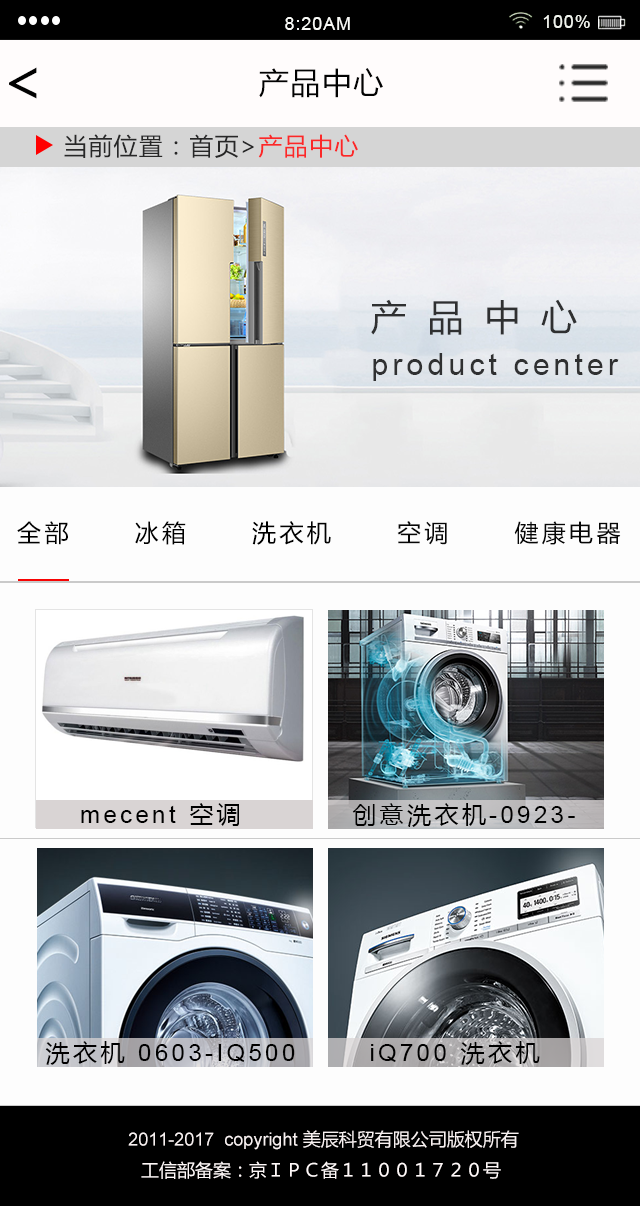
<style>
.page{position:relative;width:640px;height:1206px}
.page>*{position:absolute;margin:0}
.t1{font:18px "ArialMT";letter-spacing:0.05em;color:#f9faf7}
.t2{font:18px "ArialMT";letter-spacing:0.05em;color:#f1f4ee}
.t3{font:60px "MicrosoftYaHei";letter-spacing:0.05em;color:#020202}
.t4{font:30px "MicrosoftYaHei";letter-spacing:0.05em;color:#020202}
.t5{font:24px "MicrosoftYaHei";letter-spacing:0.05em}
.t6{font:36px "MicrosoftYaHei";letter-spacing:0.14em;color:#2f3031}
.t7{font:30px "ArialMT";letter-spacing:0.14em;color:#2f3031}
.t8{font:24px "MicrosoftYaHei";letter-spacing:0.14em;color:#000000}
.t9{font:24px "MicrosoftYaHei";letter-spacing:0.14em;color:#060606}
.t10{font:24px "ArialMT";letter-spacing:0.14em;color:#000000}
.t11{font:18px/3px "ArialMT";color:#f8f1f1}
.t12{font:18px/3px "MicrosoftYaHei";color:#f8f1f1}
.t13{font:18px/31px "MicrosoftYaHei";color:#fff9f9}
</style>
<div class="page">
<p class="t1" style="left:285px;top:17px;width:65px;height:13px">8:20AM</p>
<p class="t2" style="left:543px;top:15px;width:47px;height:13px">100%</p>
<p class="t3" style="left:9px;top:67px;width:28px;height:32px">&lt;</p>
<p class="t4" style="left:259px;top:68px;width:124px;height:30px">产品中心</p>
<p class="t5" style="left:64px;top:134px;width:294px;height:24px">当前位置：首页&gt;产品中心</p>
<p class="t6" style="left:371px;top:299px;width:206px;height:36px">产 品 中 心</p>
<p class="t7" style="left:373px;top:353px;width:246px;height:28px">product center</p>
<p class="t8" style="left:17px;top:521px;width:604px;height:24px">全部      冰箱      洗衣机      <span class="t9">空调      健康电器</span></p>
<p class="t10" style="left:81px;top:803px;width:158px;height:23px">mecent<span class="t8"> 空调</span></p>
<p class="t10" style="left:352px;top:803px;width:223px;height:24px"><span class="t8">创意洗衣机</span>-0923-</p>
<p class="t10" style="left:45px;top:1041px;width:250px;height:24px"><span class="t8">洗衣机 </span>0603-IQ500</p>
<p class="t10" style="left:371px;top:1041px;width:169px;height:24px">iQ700<span class="t8"> 洗衣机</span></p>
<p class="t11" style="left:128px;top:1130px;width:391px;height:49px;text-align:justify">2011-2017  copyright<span class="t12"> 美辰科贸有限公司版权所有<br></span><span class="t13">工信部备案：京ＩＰＣ备１１００１７２０号</span></p>
</div>
